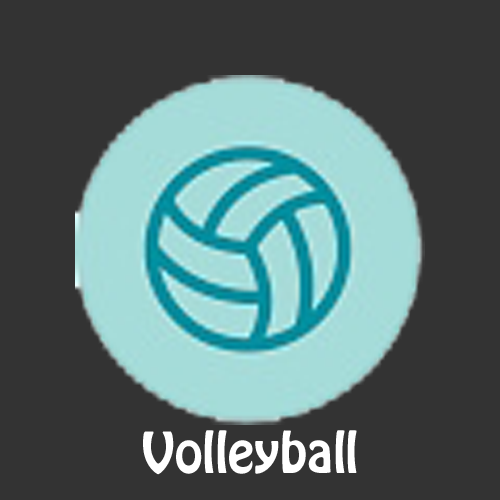
<style>
.page{position:relative;width:500px;height:500px;background:#333333}
.page>*{position:absolute;margin:0}
.t1{font:50px "HoboStd";color:#ffffff}
</style>
<div class="page">
<p class="t1" style="left:143px;top:430px;width:214px;height:45px">Volleyball</p>
</div>
